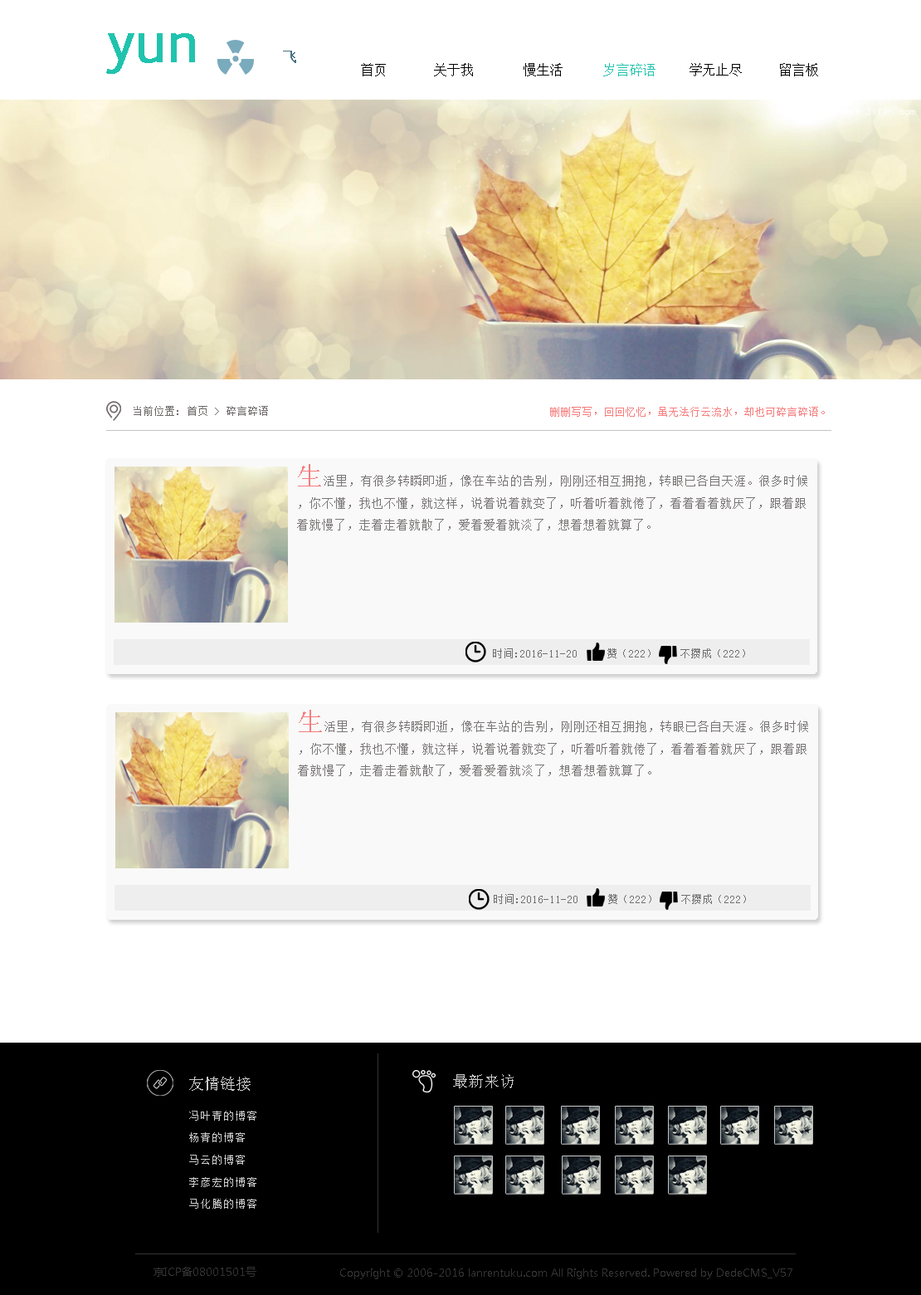
<style>
.page{position:relative;width:921px;height:1295px;background:#ffffff}
.page>*{position:absolute;margin:0}
.t1{font:13.3px "SimSun";color:#040404}
.t2{font:13.3px "SimSun";color:#21c3ae}
.t3{font:11.1px "SimSun";color:#706a6a}
.t4{font:11.1px "SimSun";color:#f67f7f}
.t5{font:12.2px/22.1px "SimSun";color:#797575}
.t6{font:26.6px/22.1px "SimSun";color:#f67d7d}
.t7{font:11.1px "SimSun";color:#727070}
.t8{font:15.5px "SimSun";color:#cccccc}
.t9{font:11.1px/22.1px "NSimSun";color:#cccccc}
.t10{font:11.1px "MicrosoftYaHei";color:#333333}
</style>
<div class="page">
<p class="t1" style="left:361px;top:63px;width:457px;height:13px">首页    关于我    慢生活      <span class="t2">岁言碎语</span>  学无止尽  留言板</p>
<p class="t3" style="left:134px;top:406px;width:134px;height:10px">当前位置: 首页 &gt; 碎言碎语</p>
<p class="t4" style="left:550px;top:407px;width:275px;height:10px">删删写写，回回忆忆，虽无法行云流水，却也可碎言碎语。</p>
<p class="t5" style="left:297px;top:464px;width:510px;height:66px"><span class="t6">生</span>活里，有很多转瞬即逝，像在车站的告别，刚刚还相互拥抱，转眼已各自天涯。很多时候，你不懂，我也不懂，就这样，说着说着就变了，听着听着就倦了，看着看着就厌了，跟着跟着就慢了，走着走着就散了，爱着爱着就淡了，想着想着就算了。</p>
<p class="t7" style="left:493px;top:648px;width:252px;height:10px">时间:2016-11-20     赞（222）    不攒成（222）</p>
<p class="t5" style="left:298px;top:710px;width:510px;height:66px"><span class="t6">生</span>活里，有很多转瞬即逝，像在车站的告别，刚刚还相互拥抱，转眼已各自天涯。很多时候，你不懂，我也不懂，就这样，说着说着就变了，听着听着就倦了，看着看着就厌了，跟着跟着就慢了，走着走着就散了，爱着爱着就淡了，想着想着就算了。</p>
<p class="t7" style="left:494px;top:894px;width:252px;height:10px">时间:2016-11-20     赞（222）    不攒成（222）</p>
<p class="t8" style="left:453px;top:1074px;width:61px;height:14px">最新来访</p>
<p class="t8" style="left:189px;top:1076px;width:62px;height:14px">友情链接</p>
<p class="t9" style="left:189px;top:1110px;width:67px;height:98px">冯叶青的博客<br>杨青的博客<br>马云的博客<br>李彦宏的博客<br>马化腾的博客</p>
<p class="t10" style="left:154px;top:1266px;width:102px;height:10px">京ICP备08001501号</p>
<p class="t10" style="left:340px;top:1268px;width:452px;height:11px">Copyright © 2006-2016 lanrentuku.com All Rights Reserved. Powered by DedeCMS_V57</p>
</div>
